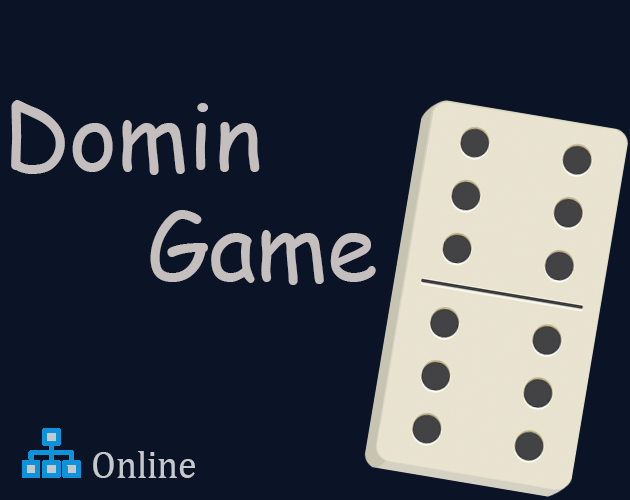
<style>
.page{position:relative;width:630px;height:500px;background:#0b1426}
.page>*{position:absolute;margin:0}
.t1{font:91.7px "ComicSansMS";color:#c5bebe}
.t2{font:37.5px "Cambria";color:#c5c9cb}
</style>
<div class="page">
<p class="t1" style="left:11px;top:100px;width:365px;height:185px">Domin<br>    Game</p>
<p class="t2" style="left:93px;top:451px;width:102px;height:27px">Online</p>
</div>
